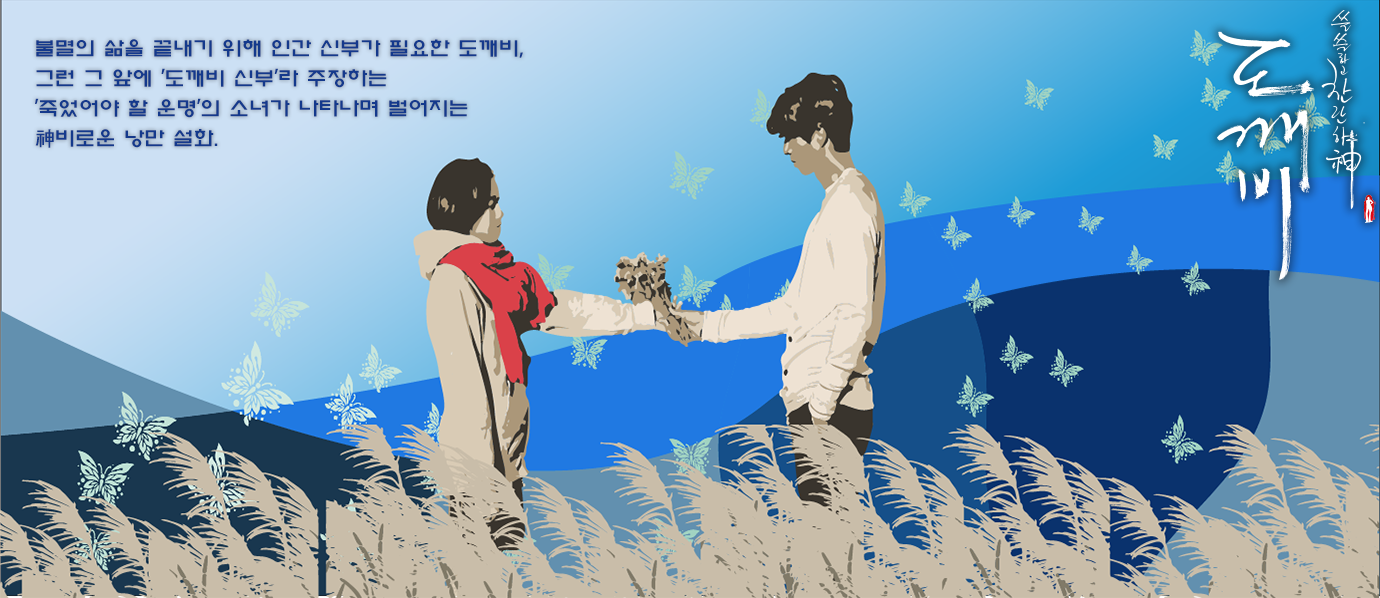
<style>
.page{position:relative;width:1380px;height:598px}
.page>*{position:absolute;margin:0}
.t1{font:20px/30px "ExpoM-HM";letter-spacing:0.015em;color:#14398c}
</style>
<div class="page">
<p class="t1" style="left:35px;top:39px;width:488px;height:109px">불멸의 삶을 끝내기 위해 인간 신부가 필요한 도깨비, <br>그런 그 앞에 '도깨비 신부'라 주장하는<br>'죽었어야 할 운명'의 소녀가 나타나며 벌어지는<br>神비로운 낭만 설화.</p>
</div>
